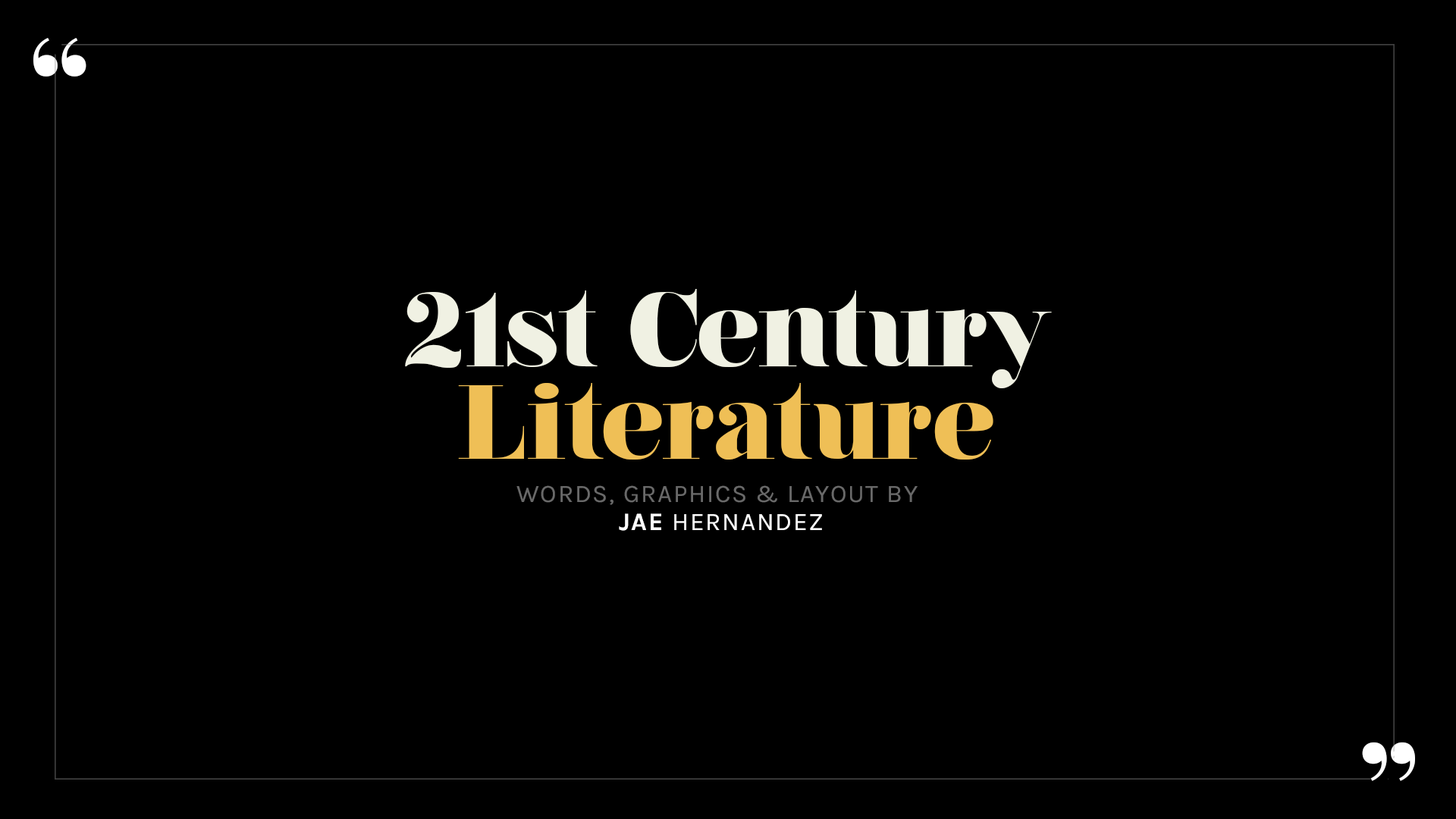
<style>
.page{position:relative;width:1456px;height:819px;background:#000000}
.page>*{position:absolute;margin:0}
.t1{font:137.7px "PlayfairDisplay-Bold";color:#ffffff}
.t2{font:105.3px "NouvelleVague-Black";color:#f0f1e3}
.t3{font:105.3px "NouvelleVague-Black";color:#efbf56}
.t4{font:25.3px "Karla-Regular";letter-spacing:0.05em;color:#696969;text-transform:uppercase}
.t5{font:25.3px "Karla-Regular";letter-spacing:0.05em;color:#ffffff;text-transform:uppercase}
.t6{font:25.3px "Karla-Bold";letter-spacing:0.05em;color:#ffffff;text-transform:uppercase}
</style>
<div class="page">
<p class="t1" style="left:33px;top:38px;width:53px;height:39px">“</p>
<p class="t2" style="left:405px;top:289px;width:647px;height:99px">21st Century</p>
<p class="t3" style="left:458px;top:383px;width:535px;height:77px">Literature</p>
<p class="t4" style="left:516px;top:485px;width:402px;height:20px">Words, Graphics &amp; Layout by</p>
<p class="t5" style="left:619px;top:513px;width:203px;height:18px"><span class="t6">Jae</span> Hernandez</p>
<p class="t1" style="left:1362px;top:742px;width:53px;height:39px">”</p>
</div>
